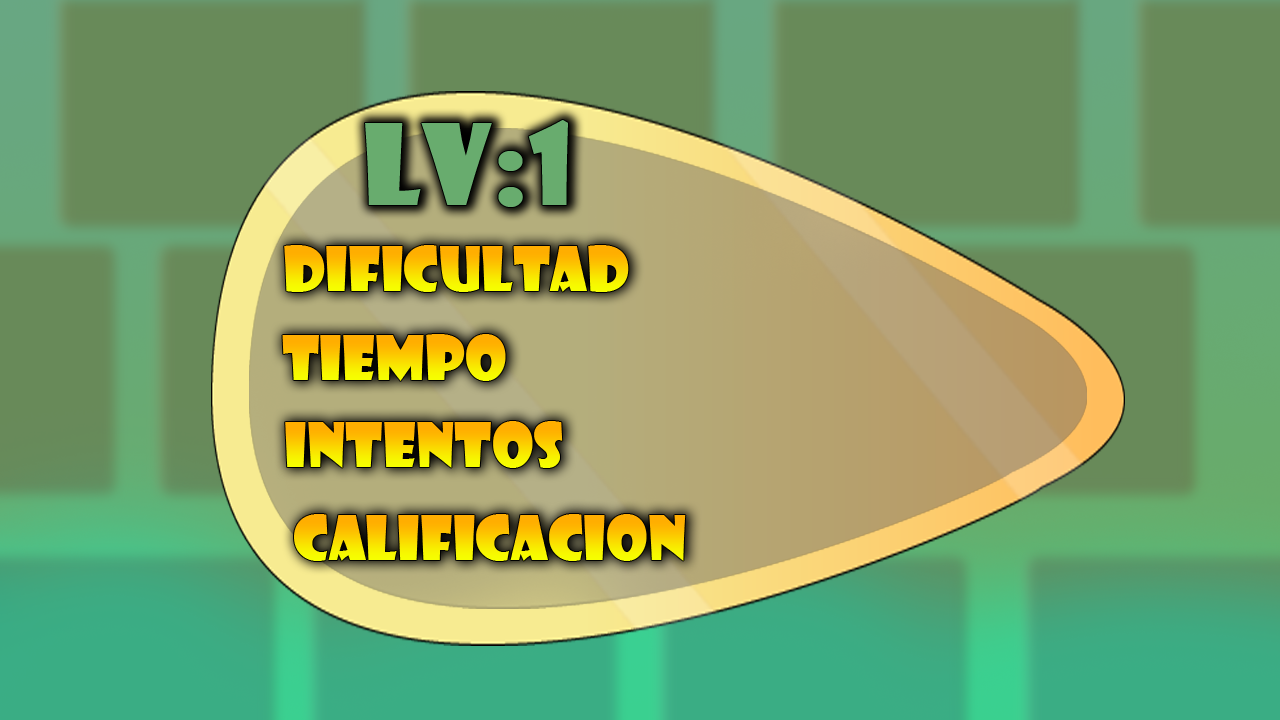
<style>
.page{position:relative;width:1280px;height:720px;background:#688a59}
.page>*{position:absolute;margin:0}
.t1{font:59.9px "ShowcardGothic-Reg"}
</style>
<div class="page">
<p class="t1" style="left:284px;top:245px;width:345px;height:47px">Dificultad</p>
<p class="t1" style="left:282px;top:334px;width:224px;height:47px">Tiempo</p>
<p class="t1" style="left:285px;top:421px;width:278px;height:47px">Intentos</p>
<p class="t1" style="left:294px;top:514px;width:392px;height:47px">Calificacion</p>
</div>
